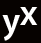
<style>
.page{position:relative;width:41px;height:43px;background:#060200}
.page>*{position:absolute;margin:0}
.t1{font:36px "MyriadPro-Semibold";color:#ffffff}
</style>
<div class="page">
<p class="t1" style="left:2px;top:15px;width:18px;height:26px">y</p>
<p class="t1" style="left:20px;top:7px;width:18px;height:18px">x</p>
</div>
